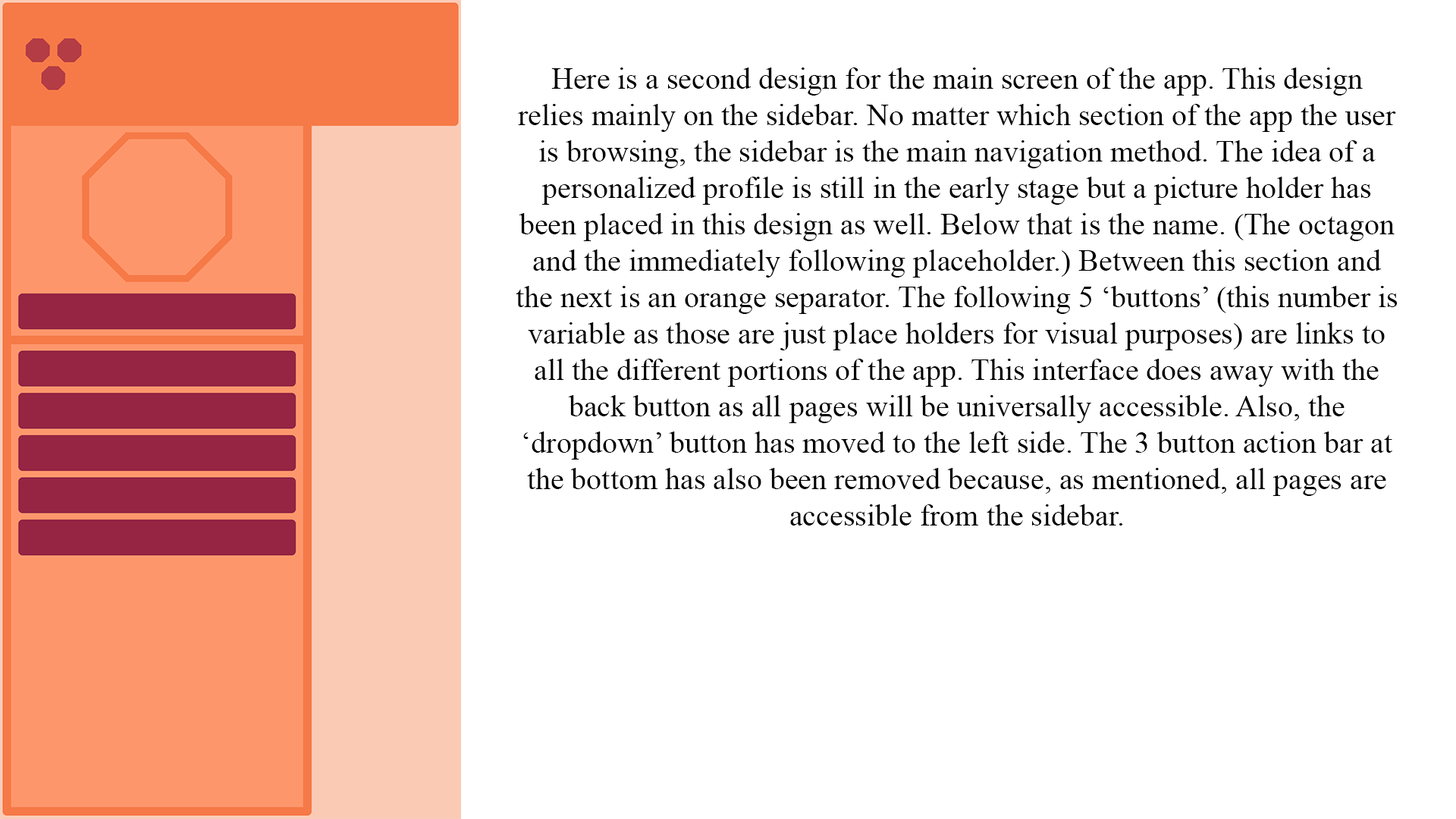
<style>
.page{position:relative;width:1456px;height:819px;background:#ffffff}
.page>*{position:absolute;margin:0}
.t1{font:30.3px "TimesNewRomanPSMT";color:#000000}
</style>
<div class="page">
<p class="t1" style="left:516px;top:67px;width:882px;height:459px;text-align:center">Here is a second design for the main screen of the app. This design relies mainly on the sidebar. No matter which section of the app the user is browsing, the sidebar is the main navigation method. The idea of a personalized profile is still in the early stage but a picture holder has been placed in this design as well. Below that is the name. (The octagon and the immediately following placeholder.) Between this section and the next is an orange separator. The following 5 ‘buttons’ (this number is variable as those are just place holders for visual purposes) are links to all the different portions of the app. This interface does away with the back button as all pages will be universally accessible. Also, the ‘dropdown’ button has moved to the left side. The 3 button action bar at the bottom has also been removed because, as mentioned, all pages are accessible from the sidebar.</p>
</div>
